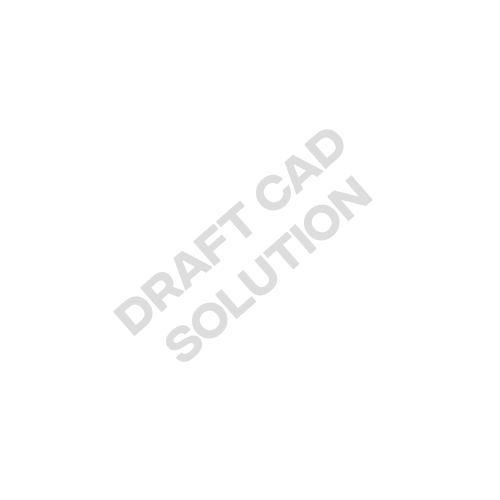
<style>
.page{position:relative;width:500px;height:500px;background:#ffffff}
.page>*{position:absolute;margin:0}
.t1{font:45.1px "FONTSPRINGDEMO-IntegralCFRegular";color:#dddddd;font-weight:bold}
</style>
<div class="page">
<p class="t1" style="left:113px;top:129px;width:260px;height:233px;text-align:center;rotate:-41deg">DRAFT CAD<br>SOLUTION</p>
</div>
